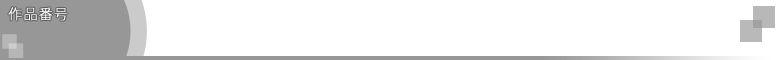
<style>
.page{position:relative;width:780px;height:60px;background:#ffffff}
.page>*{position:absolute;margin:0}
.t1{font:14px "KozGoPro-Light";letter-spacing:0.06em;color:#ffffff;font-weight:bold}
</style>
<div class="page">
<p class="t1" style="left:8px;top:7px;width:60px;height:14px">作品番号</p>
</div>
